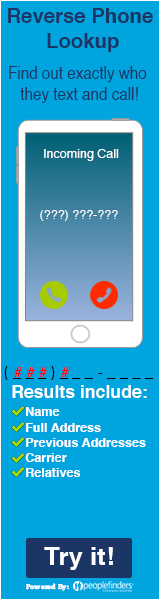
<style>
.page{position:relative;width:160px;height:600px;background:#00a5df}
.page>*{position:absolute;margin:0}
.t1{font:20.8px "Helvetica-Bold";color:#1b3664}
.t2{font:17.7px "Helvetica";color:#1b3664;scale:0.86 1}
.t3{font:12.5px "Helvetica";color:#fefefe}
.t4{font:16.7px "TwCenMT-Regular";color:#040000}
.t5{font:13.9px "Helvetica-Bold";color:#fe0000}
.t6{font:17.8px "Helvetica-Bold";color:#ffffff}
.t7{font:12.7px "Helvetica-Bold";color:#ffffff}
.t8{font:24.8px "Helvetica-Bold";color:#ffffff;scale:1.04 1}
.t9{font:6.9px "ChunkFive-Roman";color:#ffffff}
</style>
<div class="page">
<p class="t1" style="left:8px;top:8px;width:145px;height:44px;text-align:center">Reverse Phone <br>Lookup</p>
<p class="t2" style="left:9px;top:66px;width:138px;height:37px;text-align:center">Find out exactly who <br>they text and call!</p>
<p class="t3" style="left:44px;top:149px;width:75px;height:12px">Incoming Call</p>
<p class="t3" style="left:40px;top:210px;width:78px;height:11px">(???) ???-???</p>
<p class="t4" style="left:4px;top:366px;width:150px;height:14px">( _ _ _ ) _ _ _ - _ _ _ _</p>
<p class="t5" style="left:14px;top:367px;width:8px;height:10px">#</p>
<p class="t5" style="left:27px;top:367px;width:8px;height:10px">#</p>
<p class="t5" style="left:39px;top:367px;width:8px;height:10px">#</p>
<p class="t5" style="left:61px;top:367px;width:8px;height:10px">#</p>
<p class="t6" style="left:12px;top:385px;width:135px;height:13px">Results include:</p>
<p class="t7" style="left:25px;top:407px;width:121px;height:70px"><span class="t6"><br><br></span>Name <br>Full Address<br>Previous Addresses<br>Carrier<br>Relatives</p>
<p class="t8" style="left:44px;top:547px;width:69px;height:23px">Try it!</p>
<p class="t9" style="left:26px;top:583px;width:43px;height:8px">Powered By:</p>
</div>
